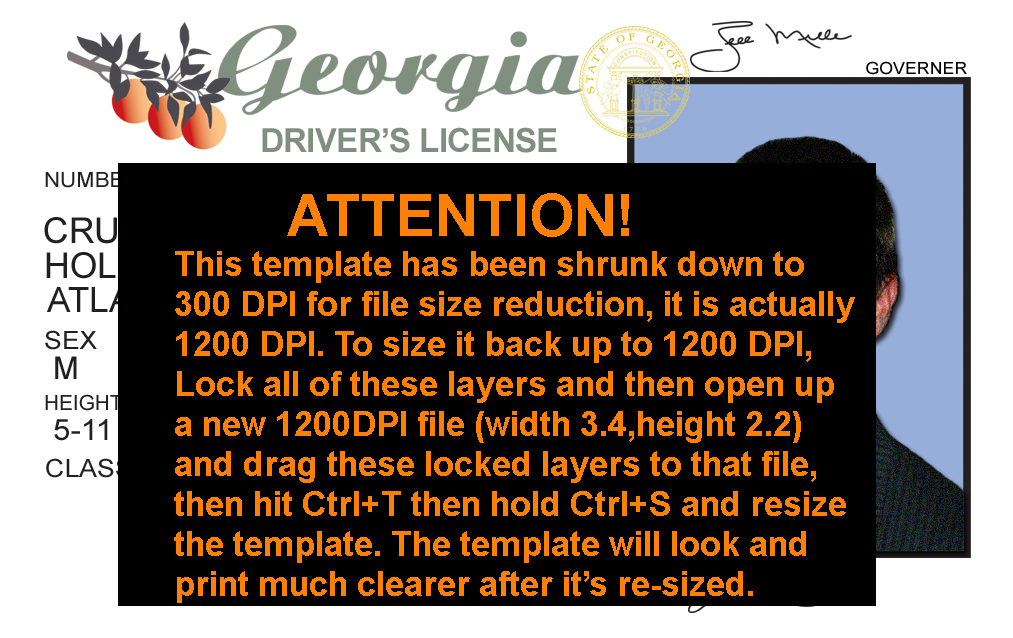
<style>
.page{position:relative;width:1013px;height:638px;background:#000000}
.page>*{position:absolute;margin:0}
.t1{font:16.7px "ArialMT";color:#000000;scale:1.07 1}
.t2{font:33.3px "Arial-BoldMT";letter-spacing:-0.025em;color:#808f7f}
.t3{font:20.8px "ArialMT";color:#231f20;scale:1.07 1}
.t4{font:33.3px "Arial-BoldMT";color:#fd7f04}
.t5{font:58.3px "Arial-BoldMT";color:#fd7f04}
.t6{font:25px "ArialMT";color:#231f20;scale:1.07 1}
.t7{font:31.2px "ArialMT";color:#231f20}
.t8{font:20.8px "ArialMT";color:#231f20}
.t9{font:29.2px "ArialMT";color:#231f20;scale:1.07 1}
</style>
<div class="page">
<p class="t1" style="left:866px;top:61px;width:101px;height:14px">GOVERNER</p>
<p class="t2" style="left:262px;top:127px;width:295px;height:26px">DRIVER’S LICENSE</p>
<p class="t3" style="left:45px;top:172px;width:95px;height:16px">NUMBER</p>
<p class="t4" style="left:174px;top:193px;width:681px;height:410px"><span class="t5">       ATTENTION!<br></span>This template has been shrunk down to<br>300 DPI for file size reduction, it is actually <br>1200 DPI. To size it back up to 1200 DPI,<br>Lock all of these layers and then open up<br>a new 1200DPI file (width 3.4,height 2.2) <br>and drag these locked layers to that file,<br>then hit Ctrl+T then hold Ctrl+S and resize<br>the template. The template will look and <br>print much clearer after it’s re-sized.</p>
<p class="t6" style="left:45px;top:330px;width:52px;height:20px">SEX</p>
<p class="t7" style="left:55px;top:356px;width:22px;height:23px">M</p>
<p class="t8" style="left:45px;top:394px;width:78px;height:17px">HEIGHT</p>
<p class="t9" style="left:54px;top:419px;width:54px;height:22px">5-11</p>
<p class="t6" style="left:46px;top:458px;width:86px;height:20px">CLASS</p>
</div>
